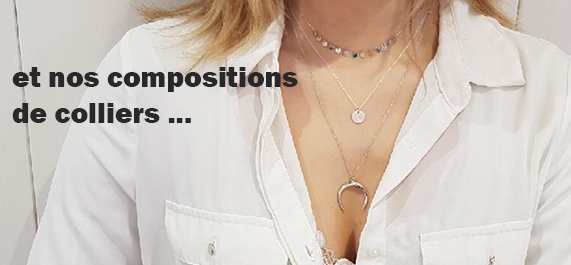
<style>
.page{position:relative;width:571px;height:265px}
.page>*{position:absolute;margin:0}
.t1{font:30px "FranklinGothic-Heavy";color:#282828}
</style>
<div class="page">
<p class="t1" style="left:12px;top:67px;width:286px;height:56px">et nos compositions de colliers ...</p>
</div>
